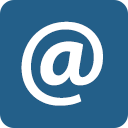
<style>
.page{position:relative;width:128px;height:128px;background:#235f89}
.page>*{position:absolute;margin:0}
.t1{font:120px "MyriadPro-Bold";color:#ffffff}
</style>
<div class="page">
<p class="t1" style="left:21px;top:21px;width:82px;height:85px">@</p>
</div>
